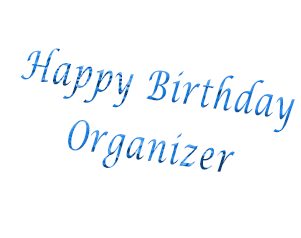
<style>
.page{position:relative;width:301px;height:238px;background:#ffffff}
.page>*{position:absolute;margin:0}
.t1{font:41.2px/4.1px "LucidaCalligraphy-Italic";letter-spacing:0.06em;scale:0.69 1}
</style>
<div class="page">
<p class="t1" style="left:20px;top:48px;width:275px;height:124px;text-align:center;rotate:9deg">Happy Birthday<br><br><br><br><br><br><br><br><br><br><br><br><br><br><br>Organizer</p>
</div>
